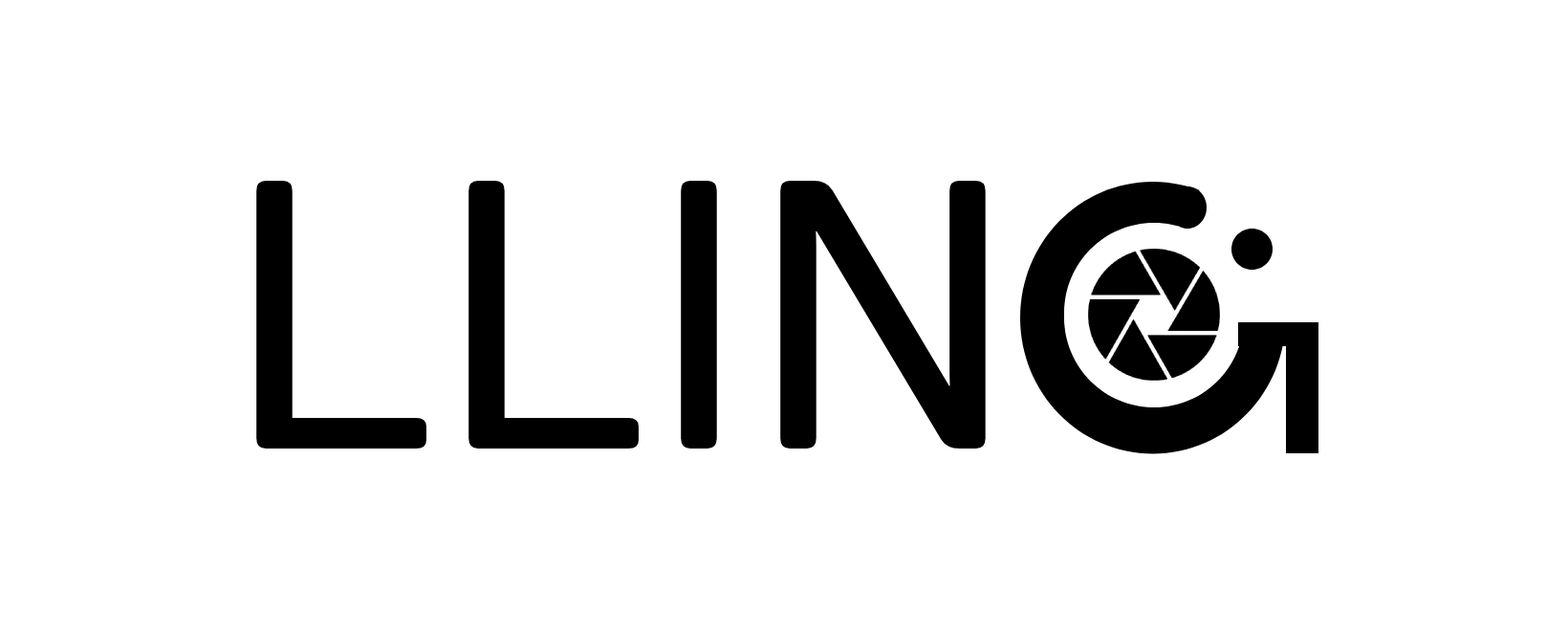
<style>
.page{position:relative;width:1568px;height:635px;background:#ffffff}
.page>*{position:absolute;margin:0}
.t1{font:382.4px "Istok-Regular";color:#000000}
</style>
<div class="page">
<p class="t1" style="left:256px;top:180px;width:730px;height:268px">LLIN</p>
</div>
